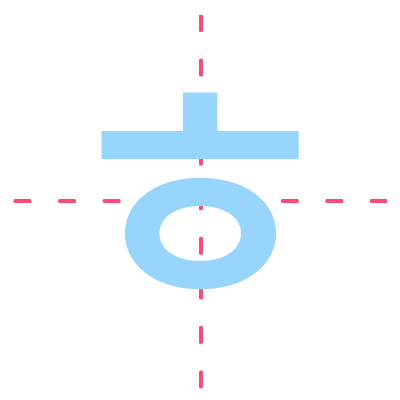
<style>
.page{position:relative;width:400px;height:400px;background:#ffffff}
.page>*{position:absolute;margin:0}
.t1{font:329.4px "NotoSansKR-Medium";letter-spacing:-0.04em;color:#98d5fd}
</style>
<div class="page">
<p class="t1" style="left:101px;top:92px;width:198px;height:198px">ㅎ</p>
</div>
